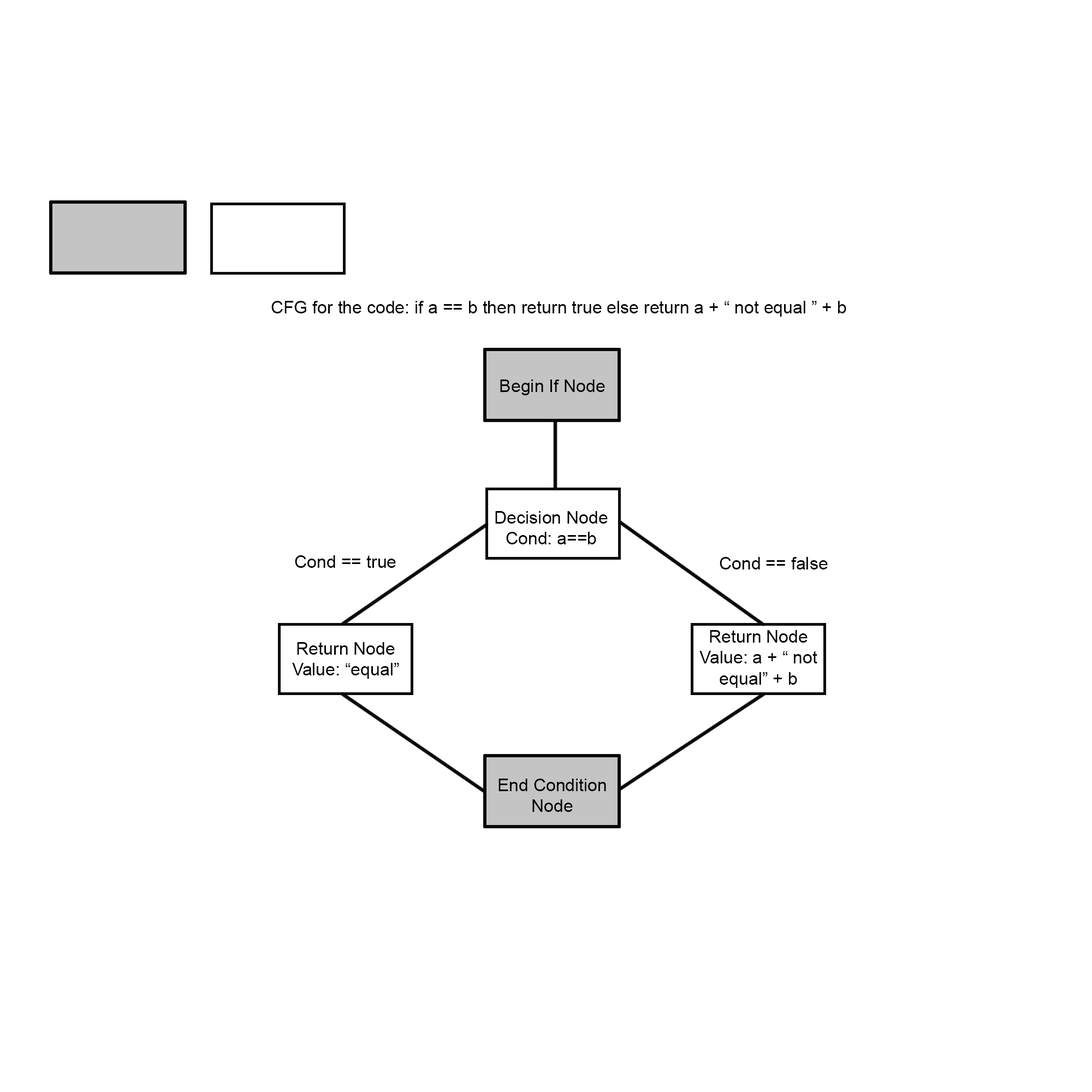
<style>
.page{position:relative;width:1092px;height:1092px;background:#ffffff}
.page>*{position:absolute;margin:0}
.t1{font:17.5px "ArialMT";color:#000000}
</style>
<div class="page">
<p class="t1" style="left:271px;top:301px;width:575px;height:16px">CFG for the code: if a == b then return true else return a + “ not equal ” + b</p>
<p class="t1" style="left:500px;top:379px;width:105px;height:16px">Begin If Node</p>
<p class="t1" style="left:495px;top:511px;width:113px;height:33px;text-align:center">Decision Node<br>Cond: a==b</p>
<p class="t1" style="left:295px;top:555px;width:101px;height:13px">Cond == true</p>
<p class="t1" style="left:720px;top:557px;width:108px;height:12px">Cond == false</p>
<p class="t1" style="left:699px;top:630px;width:118px;height:58px;text-align:center">Return Node<br>Value: a + “ not equal” + b</p>
<p class="t1" style="left:292px;top:642px;width:107px;height:37px;text-align:center">Return Node<br>Value: “equal”</p>
<p class="t1" style="left:498px;top:779px;width:108px;height:33px;text-align:center">End Condition Node</p>
</div>
